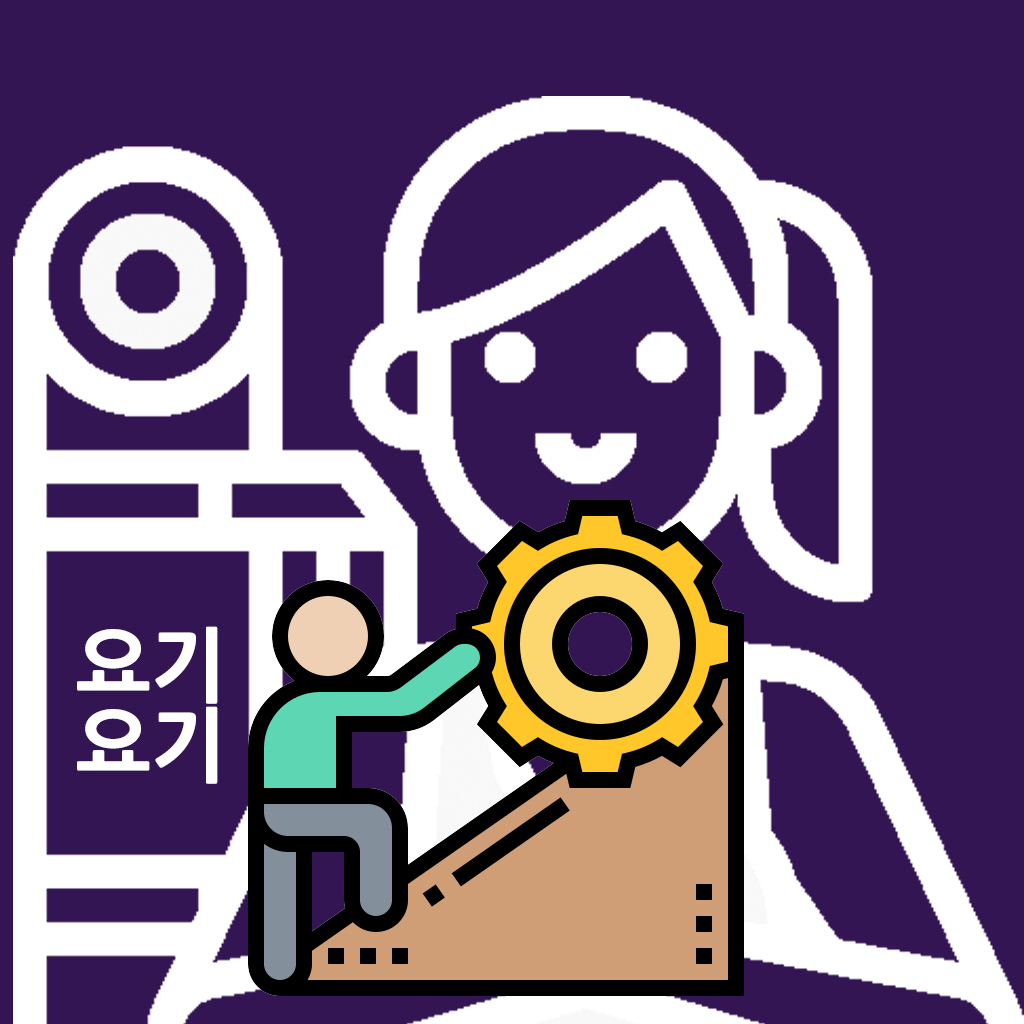
<style>
.page{position:relative;width:1024px;height:1024px;background:#341553}
.page>*{position:absolute;margin:0}
.t1{font:80px/80px "NanumGothicExtraBold";color:#ffffff}
</style>
<div class="page">
<p class="t1" style="left:77px;top:626px;width:141px;height:158px">요기<br>요기</p>
</div>
